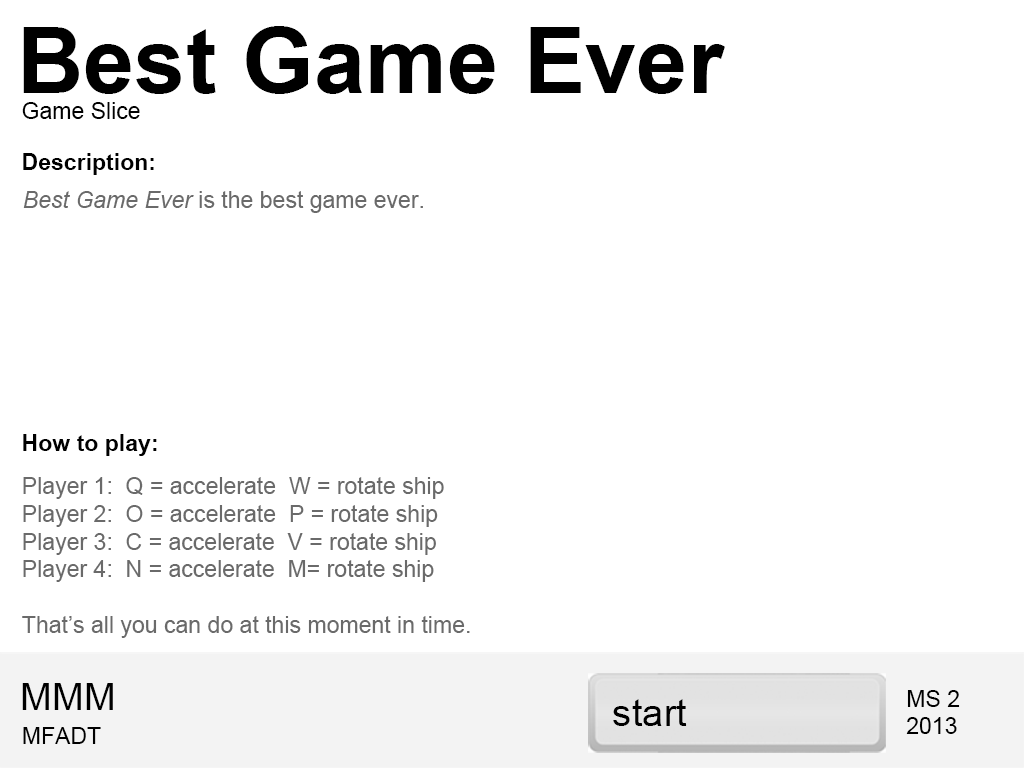
<style>
.page{position:relative;width:1024px;height:768px;background:#ffffff}
.page>*{position:absolute;margin:0}
.t1{font:92.2px "Arial-BoldMT";color:#000000}
.t2{font:23px "ArialMT";color:#000000}
.t3{font:23px "Arial-BoldMT";color:#000000}
.t4{font:23px "ArialMT";color:#6a6a6a}
.t5{font:23px "Arial-ItalicMT";color:#6a6a6a}
.t6{font:38.4px "ArialMT";color:#000000}
</style>
<div class="page">
<p class="t1" style="left:23px;top:26px;width:702px;height:68px">Best Game Ever</p>
<p class="t2" style="left:22px;top:102px;width:118px;height:17px">Game Slice</p>
<p class="t3" style="left:23px;top:153px;width:131px;height:22px">Description:</p>
<p class="t4" style="left:23px;top:191px;width:400px;height:22px"><span class="t5">Best Game Ever </span>is the best game ever.</p>
<p class="t3" style="left:23px;top:434px;width:134px;height:22px">How to play:</p>
<p class="t4" style="left:22px;top:477px;width:448px;height:161px">Player 1:  Q = accelerate  W = rotate ship<br>Player 2:  O = accelerate  P = rotate ship<br>Player 3:  C = accelerate  V = rotate ship<br>Player 4:  N = accelerate  M= rotate ship<br><br>That’s all you can do at this moment in time.</p>
<p class="t6" style="left:22px;top:683px;width:91px;height:27px">MMM</p>
<p class="t6" style="left:613px;top:699px;width:74px;height:27px">start</p>
<p class="t2" style="left:906px;top:690px;width:54px;height:44px">MS 2<br>2013</p>
<p class="t2" style="left:23px;top:727px;width:78px;height:17px">MFADT</p>
</div>
